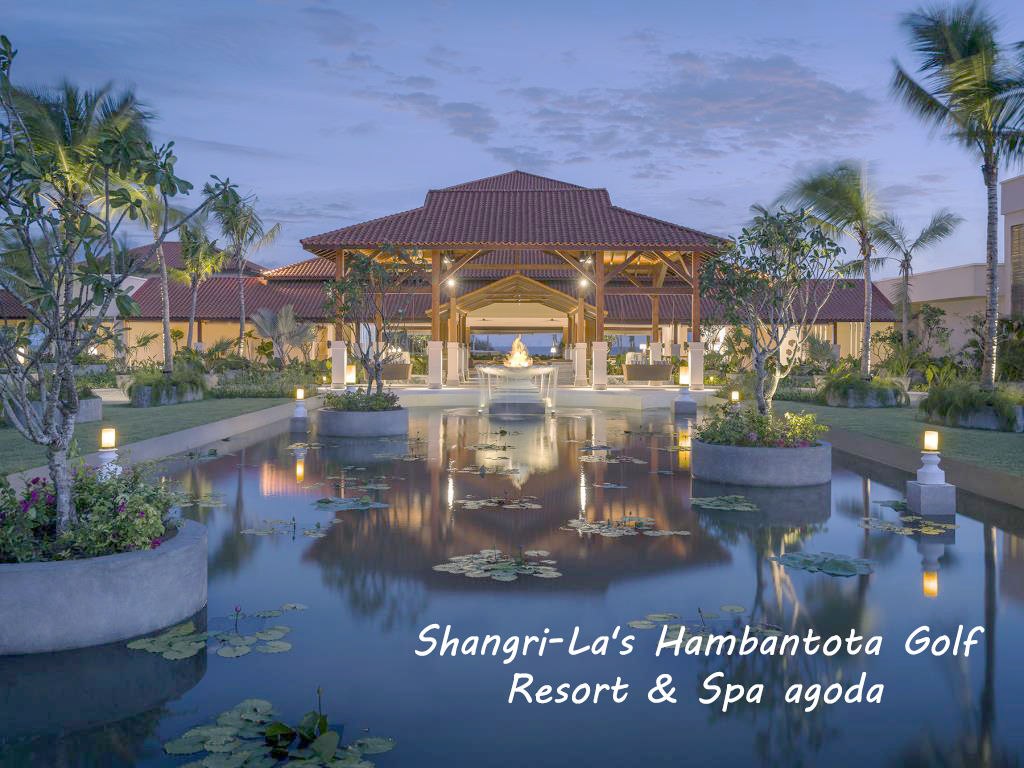
<style>
.page{position:relative;width:1024px;height:768px}
.page>*{position:absolute;margin:0}
.t1{font:40px "MVBoli";color:#fefefe}
</style>
<div class="page">
<p class="t1" style="left:415px;top:623px;width:570px;height:89px;text-align:center">Shangri-La's Hambantota Golf Resort &amp; Spa agoda</p>
</div>
